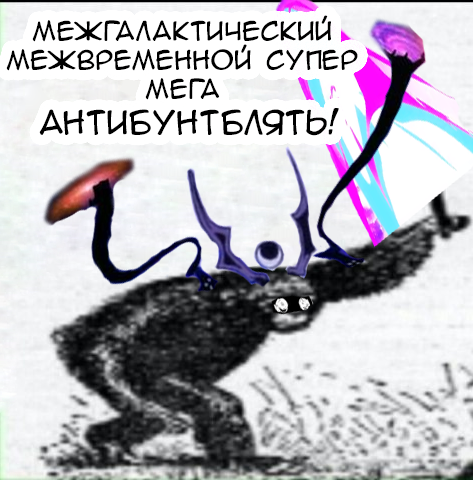
<style>
.page{position:relative;width:473px;height:480px}
.page>*{position:absolute;margin:0}
.t1{font:24px "AnimeAcev05";color:#000000}
.t2{font:30px "AnimeAcev05";color:#000000}
</style>
<div class="page">
<p class="t1" style="left:6px;top:15px;width:352px;height:121px;text-align:center">межгалактический <br>межвременной супер <br>мега <br><span class="t2">АНТИБУНТБЛЯТЬ!</span></p>
</div>
